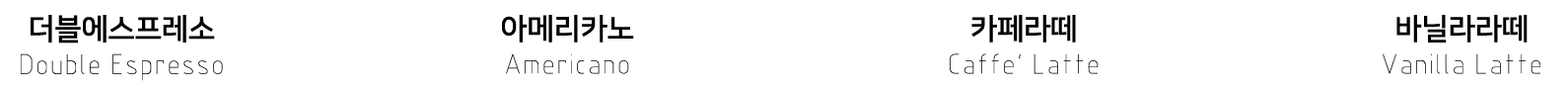
<style>
.page{position:relative;width:1568px;height:90px;background:#ffffff}
.page>*{position:absolute;margin:0}
.t1{font:29.6px "GENISO";letter-spacing:-0.01em;color:#000000}
.t2{font:29.6px "NanumSquareB";letter-spacing:-0.01em;color:#000000}
.t3{font:29.4px "GENISO";letter-spacing:-0.01em;color:#000000}
.t4{font:29.4px "NanumSquareB";letter-spacing:-0.01em;color:#000000}
</style>
<div class="page">
<p class="t1" style="left:21px;top:15px;width:202px;height:66px;text-align:center"><span class="t2">더블에스프레소<br></span>Double Espresso</p>
<p class="t3" style="left:502px;top:15px;width:132px;height:59px;text-align:center"><span class="t4">아메리카노<br></span>Americano</p>
<p class="t3" style="left:950px;top:15px;width:149px;height:59px;text-align:center"><span class="t4">카페라떼<br></span>Caffe' Latte</p>
<p class="t3" style="left:1383px;top:15px;width:157px;height:59px;text-align:center"><span class="t4">바닐라라떼<br></span>Vanilla Latte</p>
</div>
